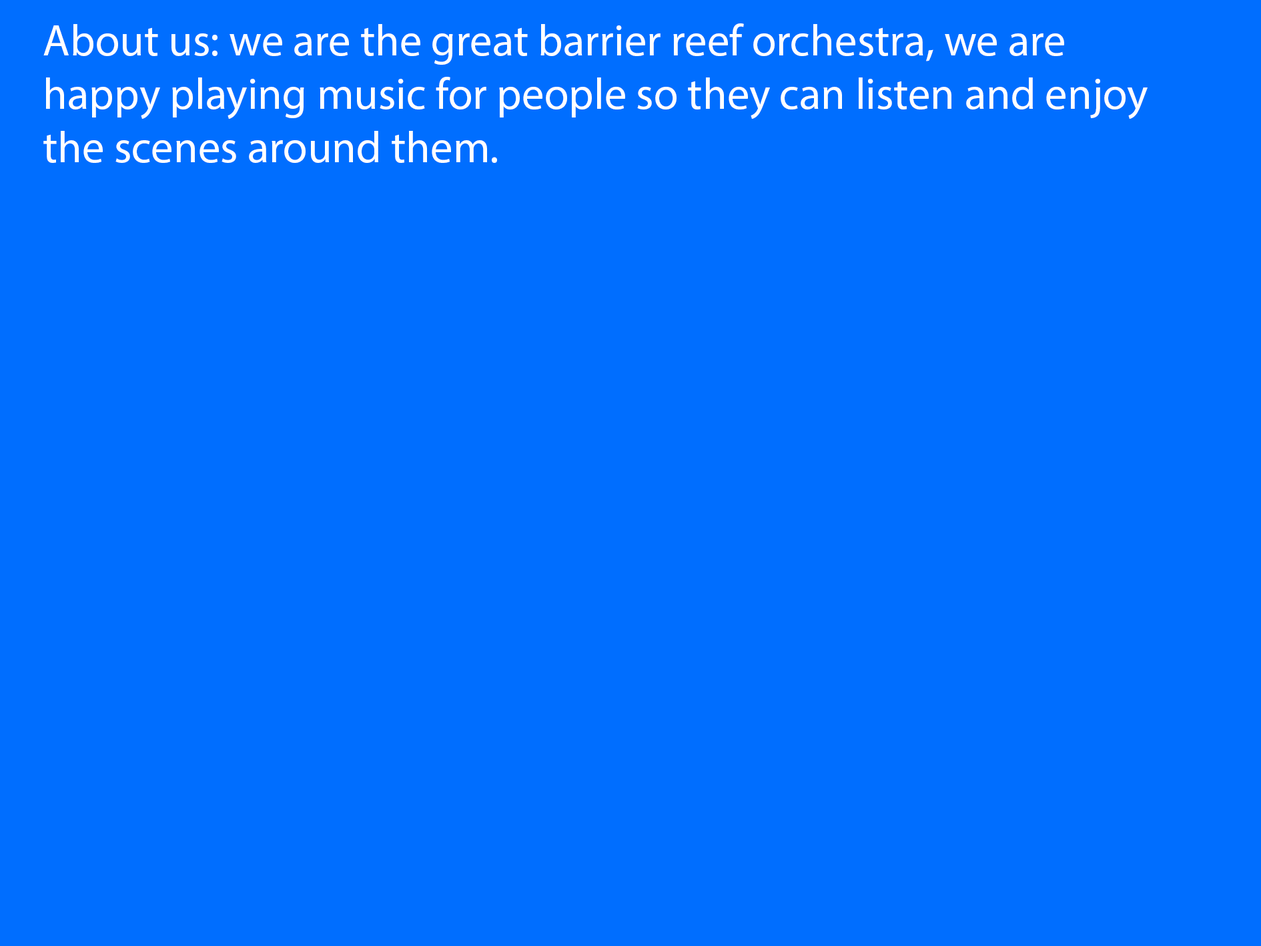
<style>
.page{position:relative;width:1261px;height:946px;background:#006eff}
.page>*{position:absolute;margin:0}
.t1{font:44.5px "MyriadPro-Regular";color:#ffffff}
</style>
<div class="page">
<p class="t1" style="left:43px;top:23px;width:1105px;height:140px">About us: we are the great barrier reef orchestra, we are happy playing music for people so they can listen and enjoy the scenes around them.</p>
</div>
